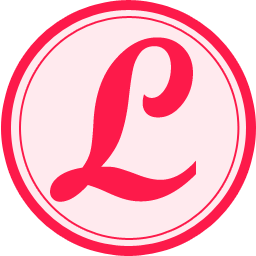
<style>
.page{position:relative;width:256px;height:256px;background:#ffeaee}
.page>*{position:absolute;margin:0}
.t1{font:232px "ScriptMTBold";color:#fd1a4a}
</style>
<div class="page">
<p class="t1" style="left:50px;top:37px;width:146px;height:165px">L</p>
</div>
